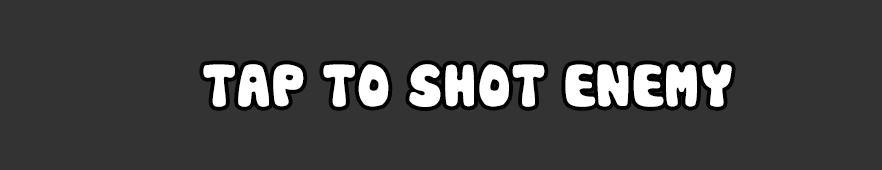
<style>
.page{position:relative;width:882px;height:170px;background:#333333}
.page>*{position:absolute;margin:0}
.t1{font:58.3px "Cookies";color:#ffffff}
</style>
<div class="page">
<p class="t1" style="left:203px;top:64px;width:529px;height:43px">TAP TO SHOT ENEMY</p>
</div>
